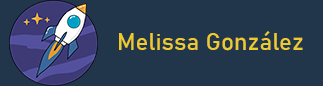
<style>
.page{position:relative;width:323px;height:86px;background:#21364b}
.page>*{position:absolute;margin:0}
.t1{font:24px "Bahnschrift";color:#edca2f}
</style>
<div class="page">
<p class="t1" style="left:119px;top:31px;width:184px;height:20px">Melissa González</p>
</div>
